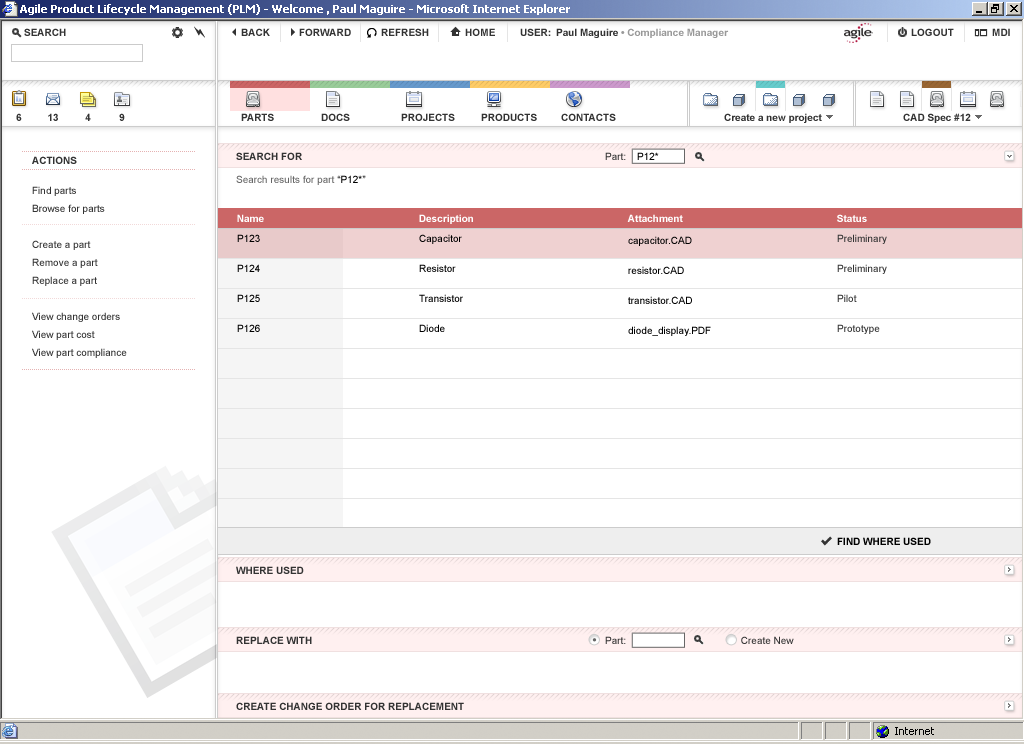
<style>
.page{position:relative;width:1024px;height:744px;background:#ffffff}
.page>*{position:absolute;margin:0}
.t1{font:10px "Arial-BoldMT";color:#333333}
.t2{font:10px "ArialMT"}
.t3{font:10px "ArialMT";color:#000000}
.t4{font:10px "ArialMT";color:#666666}
.t5{font:10px/18px "ArialMT";color:#333333}
.t6{font:10px "Arial-BoldMT";color:#ffffff}
.t7{font:10px/10px "ArialMT";color:#000000}
.t8{font:10px/10px "ArialMT";color:#333333}
.t9{font:10px "Arial-BoldMT";color:#000000}
.t10{font:10px "ArialMT";color:#333333}
</style>
<div class="page">
<p class="t1" style="left:32px;top:156px;width:45px;height:8px">ACTIONS</p>
<p class="t1" style="left:236px;top:152px;width:66px;height:8px">SEARCH FOR</p>
<p class="t2" style="left:605px;top:152px;width:21px;height:8px">Part:</p>
<p class="t3" style="left:637px;top:152px;width:22px;height:8px">P12*</p>
<p class="t4" style="left:236px;top:175px;width:130px;height:10px">Search results for part <span class="t3">“P12*”</span></p>
<p class="t5" style="left:32px;top:186px;width:95px;height:172px">Find parts<br>Browse for parts<br><br>Create a part<br>Remove a part<br>Replace a part<br><br>View change orders<br>View part cost<br>View part compliance</p>
<p class="t6" style="left:237px;top:214px;width:27px;height:8px">Name</p>
<p class="t6" style="left:419px;top:214px;width:54px;height:10px">Description</p>
<p class="t6" style="left:627px;top:214px;width:56px;height:8px">Attachment</p>
<p class="t6" style="left:837px;top:214px;width:30px;height:8px">Status</p>
<p class="t7" style="left:237px;top:234px;width:23px;height:98px">P123<br><br><br>P124<br><br><br>P125<br><br><br>P126</p>
<p class="t7" style="left:419px;top:234px;width:44px;height:98px">Capacitor<br><br><br>Resistor<br><br><br>Transistor<br><br><br>Diode</p>
<p class="t7" style="left:628px;top:236px;width:83px;height:100px">capacitor.CAD<br><br><br>resistor.CAD<br><br><br>transistor.CAD<br><br><br>diode_display.PDF</p>
<p class="t8" style="left:837px;top:234px;width:50px;height:100px">Preliminary<br><br><br>Preliminary<br><br><br>Pilot<br><br><br>Prototype</p>
<p class="t9" style="left:837px;top:537px;width:94px;height:8px">FIND WHERE USED</p>
<p class="t1" style="left:236px;top:566px;width:68px;height:8px">WHERE USED</p>
<p class="t1" style="left:236px;top:636px;width:76px;height:8px">REPLACE WITH</p>
<p class="t10" style="left:605px;top:636px;width:189px;height:8px">Part:             Create New</p>
<p class="t1" style="left:236px;top:702px;width:228px;height:8px">CREATE CHANGE ORDER FOR REPLACEMENT</p>
</div>
